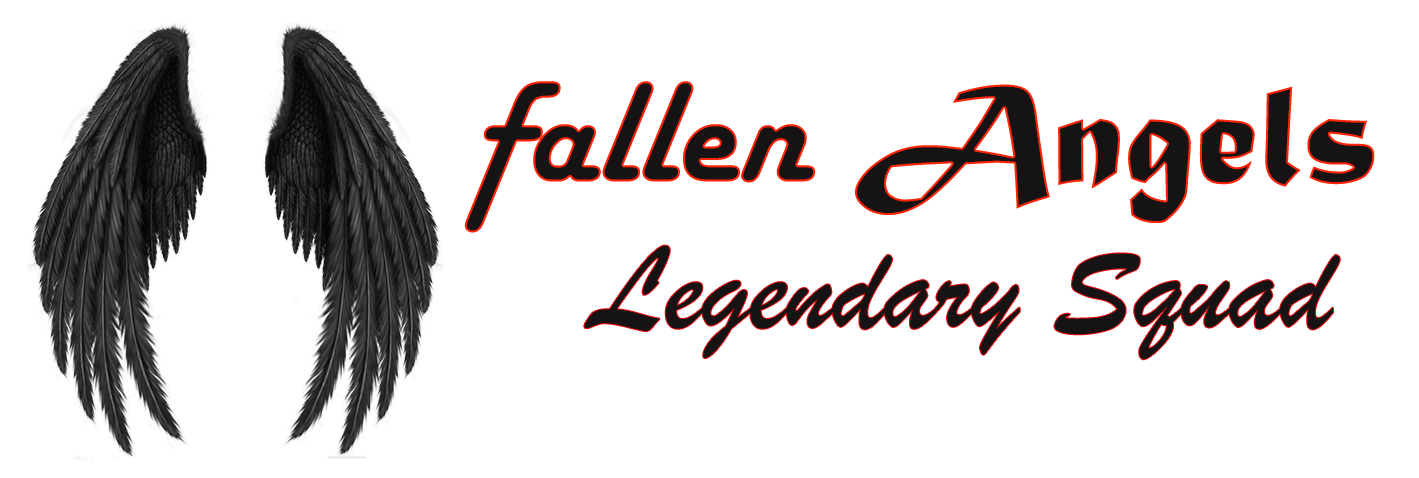
<style>
.page{position:relative;width:1419px;height:478px;background:#ffffff}
.page>*{position:absolute;margin:0}
.t1{font:150px "HarlowSolid";color:#151313}
.t2{font:150px "MaturaMTScriptCapitals";color:#151313}
.t3{font:125px "BrushScriptMT";color:#151313}
</style>
<div class="page">
<p class="t1" style="left:464px;top:81px;width:911px;height:152px">fallen <span class="t2">Angels</span></p>
<p class="t3" style="left:584px;top:245px;width:756px;height:115px">Legendary Squad</p>
</div>
